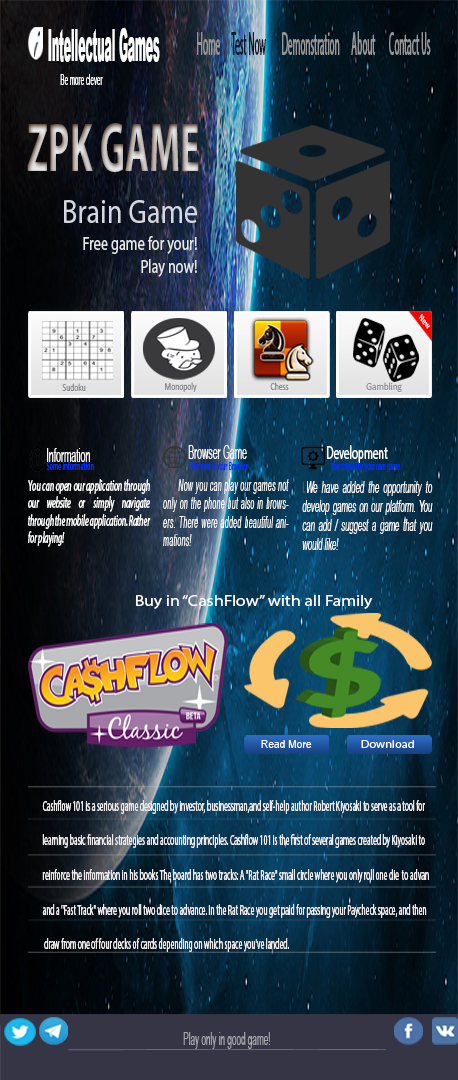
<style>
.page{position:relative;width:458px;height:1080px}
.page>*{position:absolute;margin:0}
.t1{font:44.7px "Arial-Black";color:#ffffff;scale:0.24 1}
.t2{font:44.7px "MyriadPro-Regular";color:#ffffff;scale:0.24 1}
.t3{font:48.8px "FreeportPlain";color:#1f1f31;scale:0.47 1}
.t4{font:33px "MyriadPro-Regular";color:#979797;scale:0.28 1}
.t5{font:33px "MyriadPro-Regular";color:#161628;scale:0.28 1}
.t6{font:15.1px "ArialMT";color:#ffffff;scale:0.42 1}
.t7{font:69.3px "MyriadPro-Bold";text-transform:uppercase;scale:0.53 1}
.t8{font:33.9px "MyriadPro-Regular";color:#d7d7e3;scale:0.83 1}
.t9{font:19.2px "MyriadPro-Regular";color:#e7e8ea;scale:0.74 1}
.t10{font:8.5px "Calibri";color:#ffffff;scale:0.96 1}
.t11{font:10.7px "Calibri";color:#8c8c92;scale:0.72 1}
.t12{font:10.7px "Calibri";scale:0.86 1}
.t13{font:18.6px "ArialNarrow";color:#ffffff;scale:0.58 1}
.t14{font:18.6px "ArialNarrow";color:#fff9fd;scale:0.58 1}
.t15{font:18.6px "MyriadPro-Regular";color:#ffffff;scale:0.58 1}
.t16{font:11px "MyriadPro-Regular";color:#002ef2;scale:0.58 1}
.t17{font:11px "ArialNarrow";color:#002ef2;scale:0.58 1}
.t18{font:16.3px/17.3px "MyriadPro-It";color:#ffffff;scale:0.49 1}
.t19{font:16.3px/17.3px "MyriadPro-Regular";color:#ffffff;scale:0.49 1}
.t20{font:16.3px/18.4px "Arial-ItalicMT";color:#ffffff;scale:0.46 1}
.t21{font:12.8px/18.4px "MyriadPro-Regular";color:#505050;scale:0.46 1}
.t22{font:16.3px/19.2px "Arial-ItalicMT";color:#ffffff;scale:0.47 1}
.t23{font:16.3px/19.2px "MyriadPro-Regular";color:#505050;scale:0.47 1}
.t24{font:15px "MyriadPro-Regular";color:#ffffff;scale:1.18 1}
.t25{font:10.6px "ArialNarrow";color:#ffffff;scale:1.18 1}
.t26{font:10.6px "MyriadPro-Regular";color:#ffffff;scale:1.18 1}
.t27{font:14.6px/34.6px "MyriadPro-Regular";color:#eceaea;scale:0.51 1}
.t28{font:14.8px/34.6px "MyriadPro-Regular";color:#eceaea;scale:0.51 1}
.t29{font:18.2px "ArialNarrow";color:#a6a6ab;scale:0.55 1}
</style>
<div class="page">
<p class="t1" style="left:48px;top:28px;width:112px;height:34px"><span class="t2"> </span>Intellectual Games</p>
<p class="t3" style="left:34px;top:31px;width:6px;height:26px">i</p>
<p class="t4" style="left:197px;top:31px;width:234px;height:24px">Home     <span class="t5"> Test Now        </span>Demonstration      About       Contact Us</p>
<p class="t6" style="left:60px;top:74px;width:43px;height:11px">Be more clever</p>
<p class="t7" style="left:27px;top:123px;width:172px;height:49px">ZPK GAME</p>
<p class="t8" style="left:64px;top:200px;width:133px;height:23px">Brain Game</p>
<p class="t9" style="left:83px;top:236px;width:114px;height:41px;text-align:right">Free game for your!<br>Play now!</p>
<p class="t10" style="left:418px;top:314px;width:12px;height:15px;rotate:51deg">New</p>
<p class="t11" style="left:62px;top:383px;width:24px;height:9px">Sudoku</p>
<p class="t11" style="left:165px;top:382px;width:32px;height:11px">Monopoly</p>
<p class="t11" style="left:270px;top:382px;width:19px;height:9px">Chess</p>
<p class="t12" style="left:366px;top:382px;width:36px;height:11px">Gambling</p>
<p class="t13" style="left:47px;top:448px;width:43px;height:14px">Information</p>
<p class="t14" style="left:188px;top:445px;width:59px;height:14px">Browser Game</p>
<p class="t15" style="left:327px;top:445px;width:61px;height:18px">Development</p>
<p class="t16" style="left:46px;top:462px;width:48px;height:8px">Some information</p>
<p class="t17" style="left:189px;top:462px;width:59px;height:10px">Play now in your Browser</p>
<p class="t17" style="left:330px;top:462px;width:70px;height:10px">You can make your own game</p>
<p class="t18" style="left:28px;top:479px;width:123px;height:68px;text-align:justify"><span class="t19">Y</span>ou can open our application through our website or simply navigate through the mobile application. Rather for playing!</p>
<p class="t20" style="left:163px;top:479px;width:126px;height:67px;text-align:justify"><span class="t21"> </span>Now you can play our games not only on the phone but also in browsers. There were added beautiful animations!</p>
<p class="t22" style="left:302px;top:481px;width:131px;height:69px;text-align:justify"><span class="t23">L</span>We have added the opportunity to develop games on our platform. You can add / suggest a game that you would like!</p>
<p class="t24" style="left:136px;top:595px;width:237px;height:14px">Buy in “CashFlow” with all Family</p>
<p class="t25" style="left:261px;top:740px;width:51px;height:8px">Read More</p>
<p class="t26" style="left:361px;top:740px;width:53px;height:8px">Download</p>
<p class="t27" style="left:42px;top:800px;width:387px;height:152px;text-align:justify">Cashflow 101 is a serious game designed by investor, businessman,and self-help author Robert Kiyosaki to serve as a tool for <br>learning basic financial strategies and accounting principles. Cashflow 101 is the first of several games created by Kiyosaki to <br>reinforce the information in his books The board has two tracks: A "Rat Race" small circle where you only roll one die  to advan<br>and a "Fast Track" where you roll two dice to advance. In the Rat Race you get paid for passing your Paycheck space, and then  <br> draw from one of four decks of cards depending on which space you've landed<span class="t28">.</span></p>
<p class="t29" style="left:183px;top:1032px;width:87px;height:17px">Play only in good game!</p>
</div>
